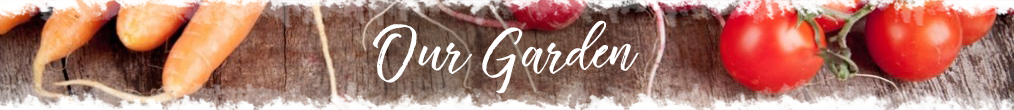
<style>
.page{position:relative;width:1014px;height:110px}
.page>*{position:absolute;margin:0}
.t1{font:69.7px "VincentiaRegular";color:#ffffff}
</style>
<div class="page">
<p class="t1" style="left:372px;top:20px;width:267px;height:74px">Our Garden</p>
</div>
